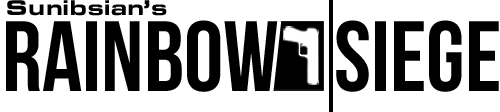
<style>
.page{position:relative;width:500px;height:112px;background:#ffffff}
.page>*{position:absolute;margin:0}
.t1{font:22.1px "EurostileExtended-Black";color:#000000}
.t2{font:99.6px "BebasNeue";color:#000000}
</style>
<div class="page">
<p class="t1" style="left:7px;top:0px;width:160px;height:16px">Sunibsian’s</p>
<p class="t2" style="left:6px;top:20px;width:272px;height:72px">Rainbow</p>
<p class="t2" style="left:336px;top:20px;width:163px;height:72px">Siege</p>
</div>
